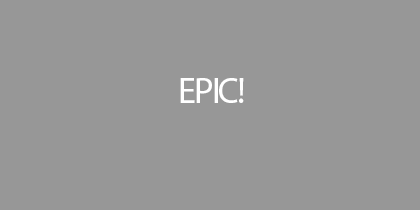
<style>
.page{position:relative;width:420px;height:210px;background:#979797}
.page>*{position:absolute;margin:0}
.t1{font:36px "MyriadPro-Regular";letter-spacing:-0.05em;color:#ffffff}
</style>
<div class="page">
<p class="t1" style="left:180px;top:78px;width:64px;height:25px">EPIC!</p>
</div>
